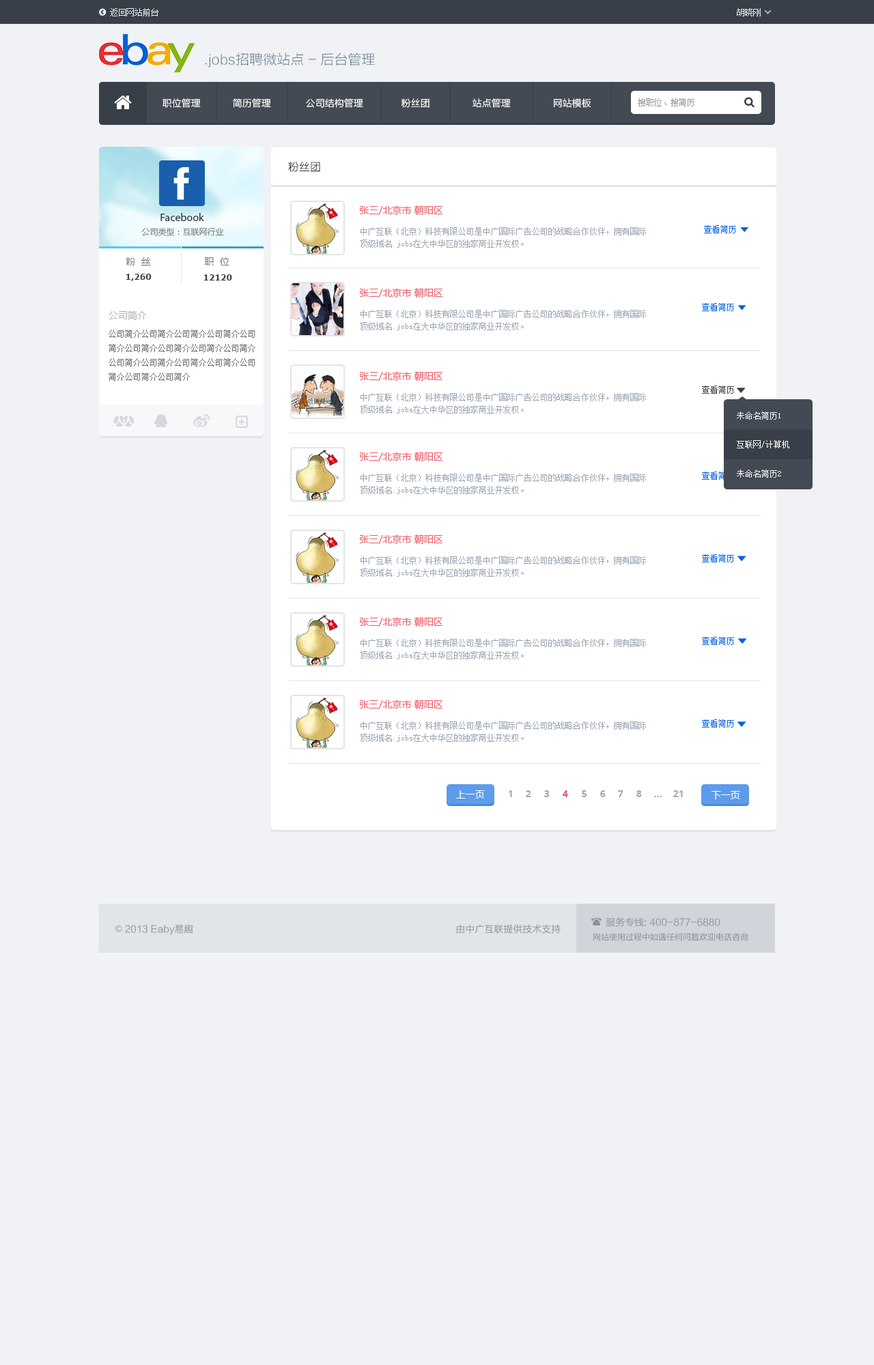
<style>
.page{position:relative;width:874px;height:1365px;background:#f0f2f5}
.page>*{position:absolute;margin:0}
.t1{font:8.2px "SimSun";color:#eceef0}
.t2{font:13.6px "FZLTXHK";color:#6c8092}
.t3{font:9.6px "FZLTXHK";color:#ffffff}
.t4{font:8.2px "SimSun";color:#959596}
.t5{font:10.9px "FZLTXHK";color:#333333}
.t6{font:9.6px "MicrosoftYaHei";color:#ed5565}
.t7{font:10.9px "MyriadPro-Regular";color:#29353f}
.t8{font:8.2px "MicrosoftYaHei";color:#798086}
.t9{font:8.2px/12.3px "SimSun";color:#99a3b1}
.t10{font:8.2px "SimSun";color:#0063dc}
.t11{font:9.6px "MicrosoftYaHei";color:#768082}
.t12{font:8.2px "Verdana-Bold";color:#414242}
.t13{font:8.2px "Verdana-Bold";color:#414141}
.t14{font:9.6px "MicrosoftYaHei";color:#abb1b5}
.t15{font:8.2px/14.3px "SimSun";color:#6c6c6c}
.t16{font:8.2px "SimSun";color:#393f48}
.t17{font:8.2px "SimSun";color:#ffffff}
.t18{font:9.6px "MicrosoftYaHei";color:#ffffff}
.t19{font:9.6px "OpenSans-Bold";color:#a4a9ae}
.t20{font:9.6px "OpenSans-Bold";color:#ed5565}
.t21{font:9.6px "FZLTHK--GBK1-0";color:#8f9399}
.t22{font:9.6px "AdobeHeitiStd-Regular";color:#8f9399}
.t23{font:8.2px "FZLTHJW--GB1-0";color:#868990}
</style>
<div class="page">
<p class="t1" style="left:110px;top:8px;width:48px;height:8px">返回网站前台</p>
<p class="t1" style="left:736px;top:8px;width:24px;height:8px">胡晓刚</p>
<p class="t2" style="left:205px;top:53px;width:170px;height:15px">.jobs招聘微站点 - 后台管理</p>
<p class="t3" style="left:162px;top:98px;width:39px;height:10px">职位管理</p>
<p class="t3" style="left:233px;top:98px;width:38px;height:10px">简历管理</p>
<p class="t3" style="left:306px;top:98px;width:57px;height:10px">公司结构管理</p>
<p class="t3" style="left:401px;top:98px;width:28px;height:10px">粉丝团</p>
<p class="t3" style="left:472px;top:98px;width:39px;height:10px">站点管理</p>
<p class="t3" style="left:554px;top:98px;width:36px;height:10px">网站模板</p>
<p class="t4" style="left:637px;top:98px;width:57px;height:8px">搜职位、搜简历</p>
<p class="t5" style="left:288px;top:161px;width:32px;height:11px">粉丝团</p>
<p class="t6" style="left:359px;top:205px;width:84px;height:11px">张三/北京市 朝阳区</p>
<p class="t7" style="left:160px;top:213px;width:44px;height:8px">Facebook</p>
<p class="t8" style="left:141px;top:227px;width:83px;height:9px">公司类型：互联网行业</p>
<p class="t9" style="left:360px;top:227px;width:286px;height:21px">中广互联（北京）科技有限公司是中广国际广告公司的战略合作伙伴，拥有国际顶级域名.jobs在大中华区的独家商业开发权。</p>
<p class="t10" style="left:704px;top:225px;width:32px;height:8px">查看简历</p>
<p class="t11" style="left:126px;top:257px;width:25px;height:9px">粉  丝</p>
<p class="t11" style="left:204px;top:257px;width:25px;height:8px">职  位</p>
<p class="t12" style="left:126px;top:274px;width:26px;height:7px">1,260</p>
<p class="t13" style="left:203px;top:274px;width:29px;height:7px">12120</p>
<p class="t6" style="left:359px;top:288px;width:84px;height:10px">张三/北京市 朝阳区</p>
<p class="t10" style="left:702px;top:303px;width:32px;height:8px">查看简历</p>
<p class="t14" style="left:109px;top:311px;width:38px;height:9px">公司简介</p>
<p class="t9" style="left:360px;top:310px;width:286px;height:20px">中广互联（北京）科技有限公司是中广国际广告公司的战略合作伙伴，拥有国际顶级域名.jobs在大中华区的独家商业开发权。</p>
<p class="t15" style="left:109px;top:330px;width:146px;height:51px">公司简介公司简介公司简介公司简介公司简介公司简介公司简介公司简介公司简介公司简介公司简介公司简介公司简介公司简介公司简介公司简介</p>
<p class="t6" style="left:359px;top:371px;width:84px;height:11px">张三/北京市 朝阳区</p>
<p class="t16" style="left:702px;top:386px;width:32px;height:8px">查看简历</p>
<p class="t9" style="left:360px;top:393px;width:286px;height:21px">中广互联（北京）科技有限公司是中广国际广告公司的战略合作伙伴，拥有国际顶级域名.jobs在大中华区的独家商业开发权。</p>
<p class="t17" style="left:736px;top:412px;width:44px;height:8px">未命名简历1</p>
<p class="t17" style="left:736px;top:440px;width:53px;height:8px">互联网/计算机</p>
<p class="t6" style="left:359px;top:452px;width:84px;height:10px">张三/北京市 朝阳区</p>
<p class="t9" style="left:360px;top:474px;width:286px;height:20px">中广互联（北京）科技有限公司是中广国际广告公司的战略合作伙伴，拥有国际顶级域名.jobs在大中华区的独家商业开发权。</p>
<p class="t10" style="left:702px;top:472px;width:32px;height:8px">查看简历</p>
<p class="t17" style="left:736px;top:470px;width:45px;height:8px">未命名简历2</p>
<p class="t6" style="left:359px;top:534px;width:84px;height:11px">张三/北京市 朝阳区</p>
<p class="t9" style="left:360px;top:556px;width:286px;height:21px">中广互联（北京）科技有限公司是中广国际广告公司的战略合作伙伴，拥有国际顶级域名.jobs在大中华区的独家商业开发权。</p>
<p class="t10" style="left:702px;top:554px;width:32px;height:8px">查看简历</p>
<p class="t6" style="left:359px;top:617px;width:84px;height:10px">张三/北京市 朝阳区</p>
<p class="t9" style="left:360px;top:639px;width:286px;height:20px">中广互联（北京）科技有限公司是中广国际广告公司的战略合作伙伴，拥有国际顶级域名.jobs在大中华区的独家商业开发权。</p>
<p class="t10" style="left:702px;top:637px;width:32px;height:8px">查看简历</p>
<p class="t6" style="left:359px;top:700px;width:84px;height:10px">张三/北京市 朝阳区</p>
<p class="t9" style="left:360px;top:721px;width:286px;height:21px">中广互联（北京）科技有限公司是中广国际广告公司的战略合作伙伴，拥有国际顶级域名.jobs在大中华区的独家商业开发权。</p>
<p class="t10" style="left:702px;top:719px;width:32px;height:9px">查看简历</p>
<p class="t18" style="left:456px;top:790px;width:29px;height:9px">上一页</p>
<p class="t19" style="left:508px;top:790px;width:4px;height:7px">1</p>
<p class="t19" style="left:526px;top:790px;width:5px;height:7px">2</p>
<p class="t19" style="left:544px;top:790px;width:5px;height:7px">3</p>
<p class="t20" style="left:562px;top:790px;width:6px;height:7px">4</p>
<p class="t19" style="left:581px;top:790px;width:6px;height:7px">5</p>
<p class="t19" style="left:600px;top:790px;width:5px;height:7px">6</p>
<p class="t19" style="left:618px;top:790px;width:5px;height:7px">7</p>
<p class="t19" style="left:636px;top:790px;width:6px;height:7px">8</p>
<p class="t19" style="left:654px;top:796px;width:7px;height:1px">...</p>
<p class="t19" style="left:673px;top:790px;width:9px;height:7px">21</p>
<p class="t18" style="left:711px;top:791px;width:29px;height:8px">下一页</p>
<p class="t21" style="left:605px;top:917px;width:115px;height:10px">服务专线: 400-877-6880</p>
<p class="t21" style="left:115px;top:924px;width:78px;height:11px"><span class="t22">©</span> 2013 Eaby易趣</p>
<p class="t21" style="left:456px;top:924px;width:104px;height:10px">由中广互联提供技术支持</p>
<p class="t23" style="left:593px;top:933px;width:155px;height:8px">网站使用过程中如遇任何问题欢迎电话咨询</p>
</div>
